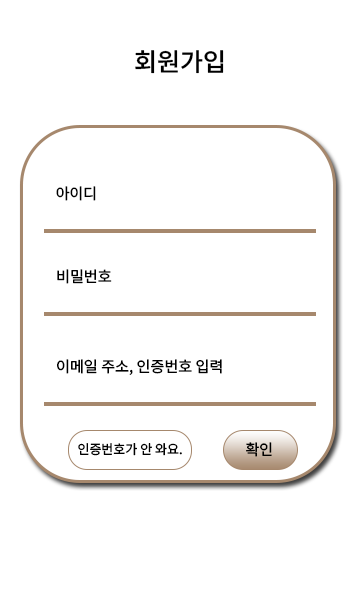
<style>
.page{position:relative;width:360px;height:600px;background:#ffffff}
.page>*{position:absolute;margin:0}
.t1{font:25px "NotoSansKR-Medium";color:#000000}
.t2{font:15px "NotoSansKR-Regular";color:#000000}
.t3{font:13px "NotoSansKR-Regular";color:#000000}
</style>
<div class="page">
<p class="t1" style="left:135px;top:50px;width:89px;height:24px">회원가입</p>
<p class="t2" style="left:56px;top:186px;width:40px;height:15px">아이디</p>
<p class="t2" style="left:57px;top:269px;width:55px;height:15px">비밀번호</p>
<p class="t2" style="left:57px;top:359px;width:165px;height:16px">이메일 주소, 인증번호 입력</p>
<p class="t3" style="left:78px;top:443px;width:104px;height:13px">인증번호가 안 와요.</p>
<p class="t2" style="left:246px;top:442px;width:26px;height:15px">확인</p>
</div>
